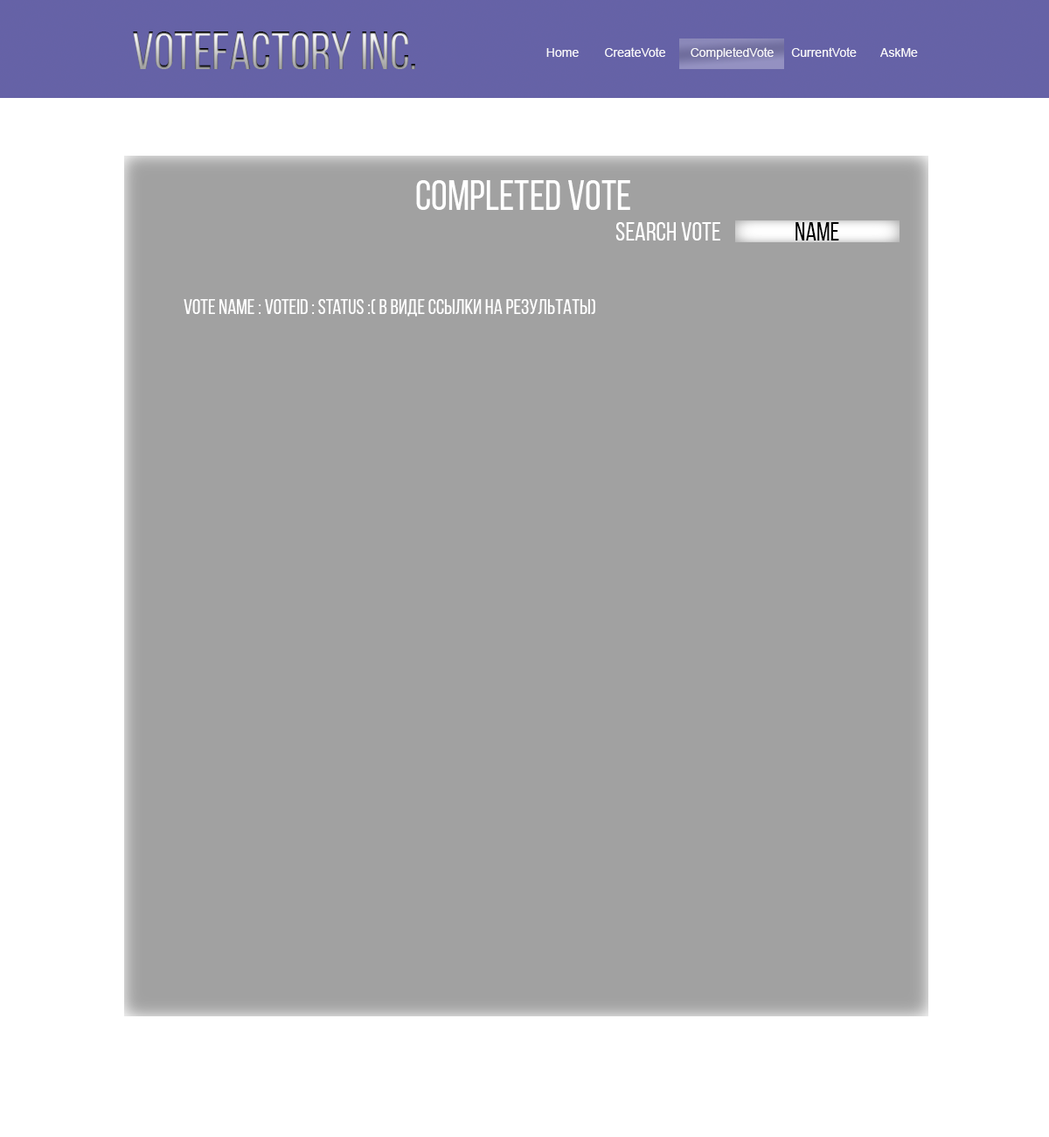
<style>
.page{position:relative;width:1049px;height:1137px;background:#a1a1a1}
.page>*{position:absolute;margin:0}
.t1{font:52.5px "BebasNeueRegular"}
.t2{font:12.2px "ArialMT";color:#f8f7fa}
.t3{font:42px "BebasNeueRegular";color:#ffffff}
.t4{font:26.2px "BebasNeueRegular";color:#ffffff}
.t5{font:26.2px "BebasNeueRegular";color:#000000}
.t6{font:21px "BebasNeueRegular";color:#ffffff}
</style>
<div class="page">
<p class="t1" style="left:133px;top:31px;width:282px;height:38px">Votefactory inc.</p>
<p class="t2" style="left:546px;top:48px;width:33px;height:9px">Home</p>
<p class="t2" style="left:605px;top:47px;width:60px;height:10px">CreateVote</p>
<p class="t2" style="left:691px;top:47px;width:83px;height:12px">CompletedVote</p>
<p class="t2" style="left:791px;top:47px;width:66px;height:10px">CurrentVote</p>
<p class="t2" style="left:880px;top:48px;width:38px;height:9px">AskMe</p>
<p class="t3" style="left:416px;top:180px;width:214px;height:30px">completed vote</p>
<p class="t4" style="left:615px;top:222px;width:105px;height:18px">search vote</p>
<p class="t5" style="left:796px;top:222px;width:43px;height:18px">name</p>
<p class="t6" style="left:184px;top:299px;width:411px;height:17px">vote name : voteId : status :( в виде ссылки на результаты)</p>
</div>
